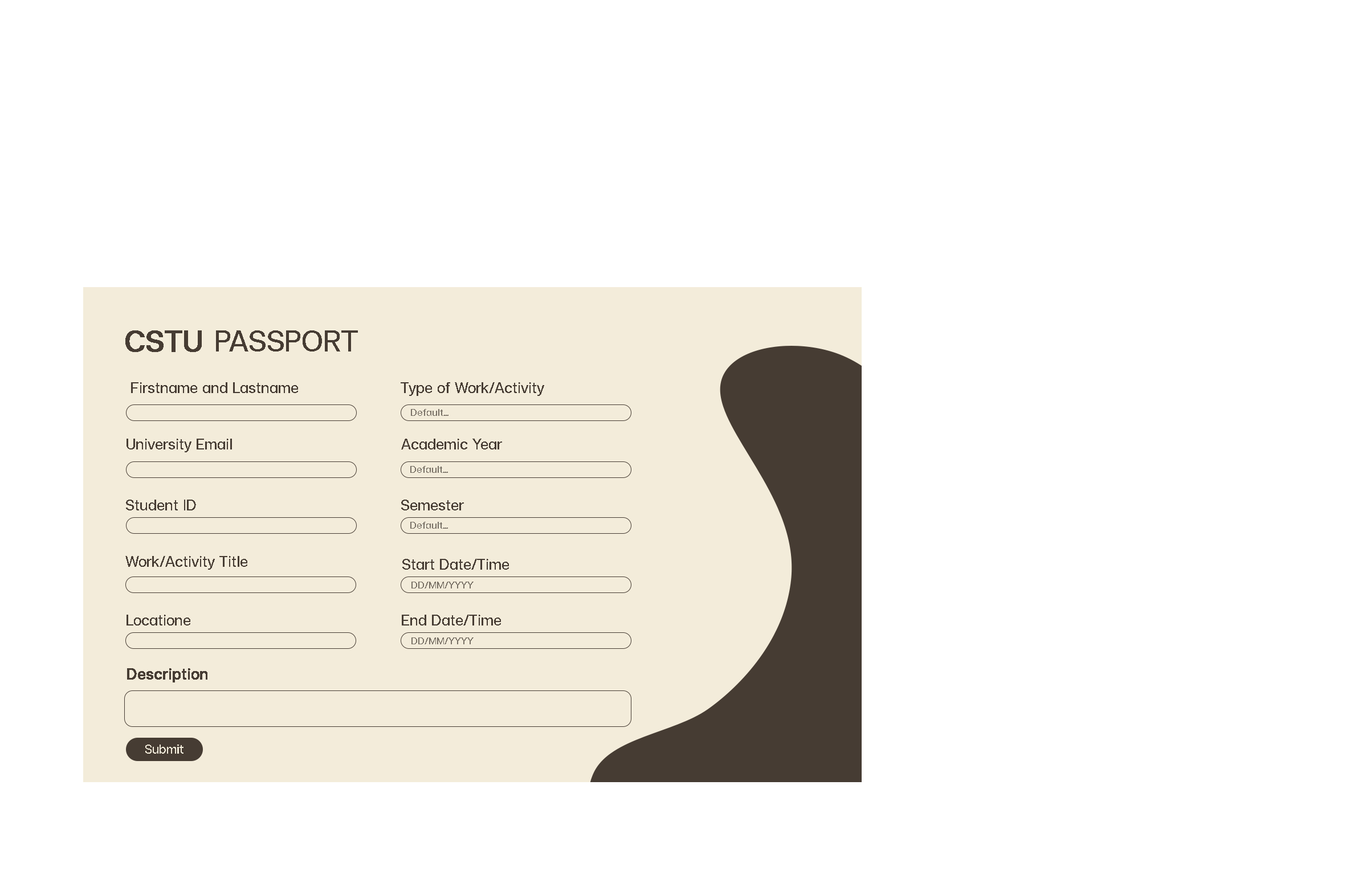
<style>
.page{position:relative;width:1362px;height:875px;background:#ffffff}
.page>*{position:absolute;margin:0}
.t1{font:41px "FCMinimalRegular";color:#463c33}
.t2{font:41px "FCMinimalRegular";color:#463c33;font-weight:bold}
.t3{font:20.5px "FCMinimalRegular";color:#463c33}
.t4{font:13.7px "FCMinimalRegular";color:#787065}
.t5{font:20.5px "FCMinimalRegular";color:#463c33;font-weight:bold}
.t6{font:17.1px "FCMinimalRegular";color:#f3ecda}
</style>
<div class="page">
<p class="t1" style="left:125px;top:331px;width:233px;height:21px"><span class="t2">CSTU </span>PASSPORT</p>
<p class="t3" style="left:131px;top:382px;width:167px;height:11px">Firstname and Lastname</p>
<p class="t3" style="left:401px;top:382px;width:143px;height:14px">Type of Work/Activity</p>
<p class="t4" style="left:411px;top:409px;width:38px;height:7px">Default...</p>
<p class="t3" style="left:127px;top:439px;width:105px;height:14px">University Email</p>
<p class="t3" style="left:401px;top:439px;width:101px;height:11px">Academic Year</p>
<p class="t4" style="left:410px;top:466px;width:38px;height:7px">Default...</p>
<p class="t3" style="left:126px;top:500px;width:70px;height:11px">Student ID</p>
<p class="t3" style="left:401px;top:500px;width:63px;height:11px">Semester</p>
<p class="t4" style="left:410px;top:522px;width:38px;height:7px">Default...</p>
<p class="t3" style="left:125px;top:556px;width:122px;height:14px">Work/Activity Title</p>
<p class="t3" style="left:402px;top:559px;width:107px;height:11px">Start Date/Time</p>
<p class="t4" style="left:411px;top:582px;width:63px;height:7px">DD/MM/YYYY</p>
<p class="t3" style="left:127px;top:615px;width:63px;height:11px">Locatione</p>
<p class="t3" style="left:402px;top:615px;width:99px;height:11px">End Date/Time</p>
<p class="t4" style="left:411px;top:638px;width:63px;height:7px">DD/MM/YYYY</p>
<p class="t5" style="left:127px;top:669px;width:80px;height:14px">Description</p>
<p class="t6" style="left:145px;top:745px;width:39px;height:9px">Submit</p>
</div>
